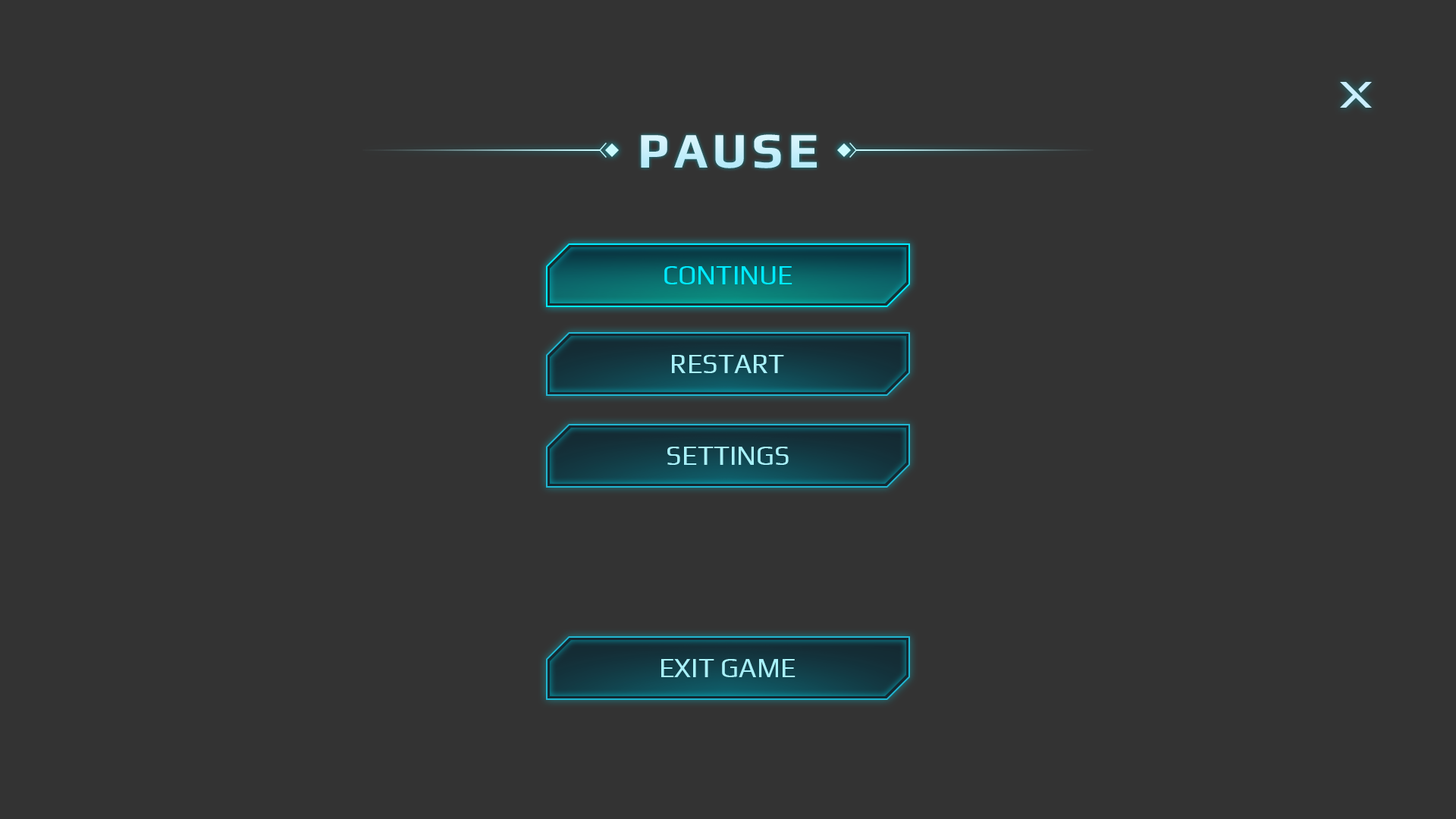
<style>
.page{position:relative;width:1456px;height:819px;background:#333333}
.page>*{position:absolute;margin:0}
.t1{font:50px "Play-Bold";letter-spacing:0.1em;color:#c8effb}
.t2{font:27.3px "Play-Regular";color:#00eaff}
.t3{font:27.3px "Play-Regular";color:#a8f1fa}
</style>
<div class="page">
<p class="t1" style="left:641px;top:134px;width:176px;height:34px">PAUSE</p>
<p class="t2" style="left:664px;top:266px;width:128px;height:18px">CONTINUE</p>
<p class="t3" style="left:672px;top:355px;width:112px;height:18px">RESTART</p>
<p class="t3" style="left:667px;top:447px;width:122px;height:18px">SETTINGS</p>
<p class="t3" style="left:661px;top:659px;width:134px;height:18px">EXIT GAME</p>
</div>
